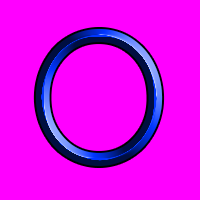
<style>
.page{position:relative;width:200px;height:200px;background:#ff00ff}
.page>*{position:absolute;margin:0}
.t1{font:200px "CopperplateGothic-Light"}
</style>
<div class="page">
<p class="t1" style="left:35px;top:29px;width:128px;height:137px">0</p>
</div>
